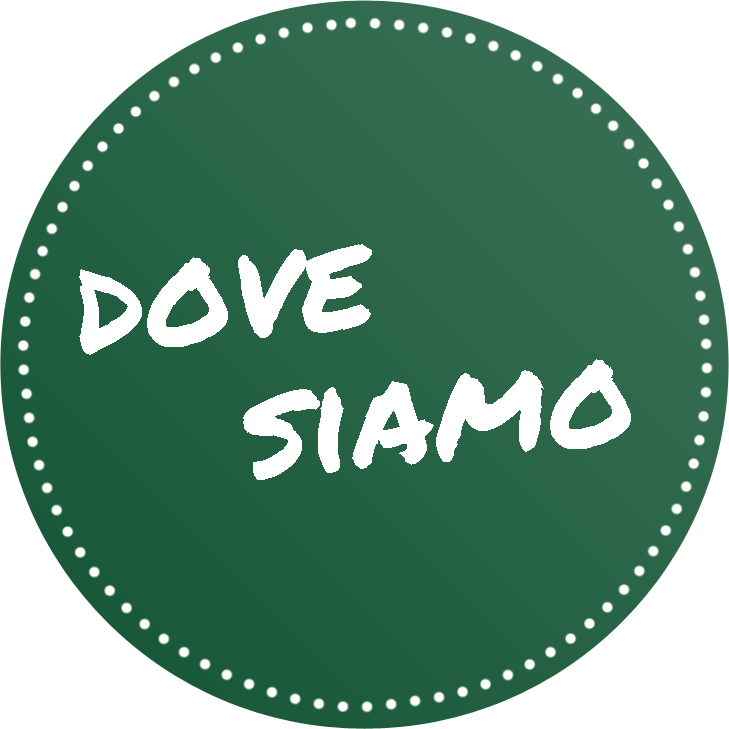
<style>
.page{position:relative;width:729px;height:729px;background:#ffffff}
.page>*{position:absolute;margin:0}
.t1{font:140px/140px "PermanentMarker";color:#ffffff}
</style>
<div class="page">
<p class="t1" style="left:79px;top:244px;width:552px;height:236px;rotate:-5deg">dove<br>   siamo</p>
</div>
